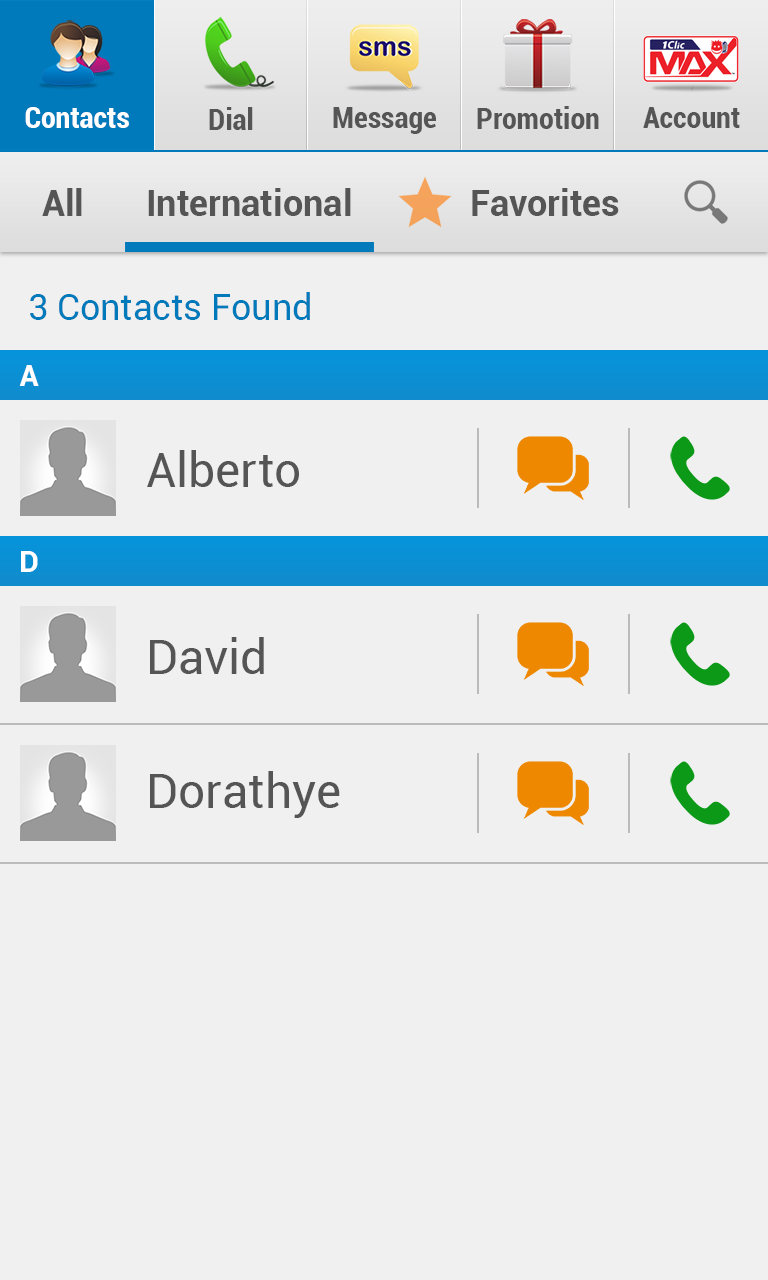
<style>
.page{position:relative;width:768px;height:1280px;background:#f0f0f0}
.page>*{position:absolute;margin:0}
.t1{font:30px "Roboto-BoldCondensed";color:#ffffff}
.t2{font:30px "Roboto-BoldCondensed";color:#555555}
.t3{font:36px "Roboto-Bold";color:#555555}
.t4{font:36px "Roboto-Regular";color:#007abb}
.t5{font:30px "Roboto-Bold";color:#ffffff}
.t6{font:48px "Roboto-Regular";color:#555555}
</style>
<div class="page">
<p class="t1" style="left:25px;top:107px;width:104px;height:21px">Contacts</p>
<p class="t2" style="left:209px;top:107px;width:44px;height:23px">Dial</p>
<p class="t2" style="left:333px;top:107px;width:103px;height:27px">Message</p>
<p class="t2" style="left:477px;top:106px;width:122px;height:23px">Promotion</p>
<p class="t2" style="left:643px;top:107px;width:97px;height:21px">Account</p>
<p class="t3" style="left:42px;top:188px;width:40px;height:28px">All</p>
<p class="t3" style="left:148px;top:188px;width:203px;height:28px">International</p>
<p class="t3" style="left:472px;top:188px;width:147px;height:28px">Favorites</p>
<p class="t4" style="left:30px;top:292px;width:280px;height:28px">3 Contacts Found</p>
<p class="t5" style="left:19px;top:365px;width:20px;height:21px">A</p>
<p class="t6" style="left:147px;top:450px;width:152px;height:37px">Alberto</p>
<p class="t5" style="left:21px;top:551px;width:17px;height:21px">D</p>
<p class="t6" style="left:150px;top:637px;width:114px;height:37px">David</p>
<p class="t6" style="left:150px;top:771px;width:190px;height:47px">Dorathye</p>
</div>
